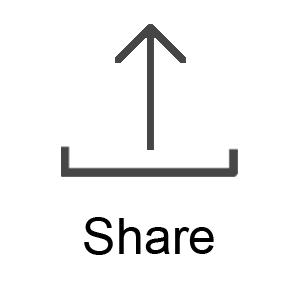
<style>
.page{position:relative;width:300px;height:300px;background:#ffffff}
.page>*{position:absolute;margin:0}
.t1{font:50px "ArialMT";color:#000000}
</style>
<div class="page">
<p class="t1" style="left:84px;top:217px;width:130px;height:38px">Share</p>
</div>
